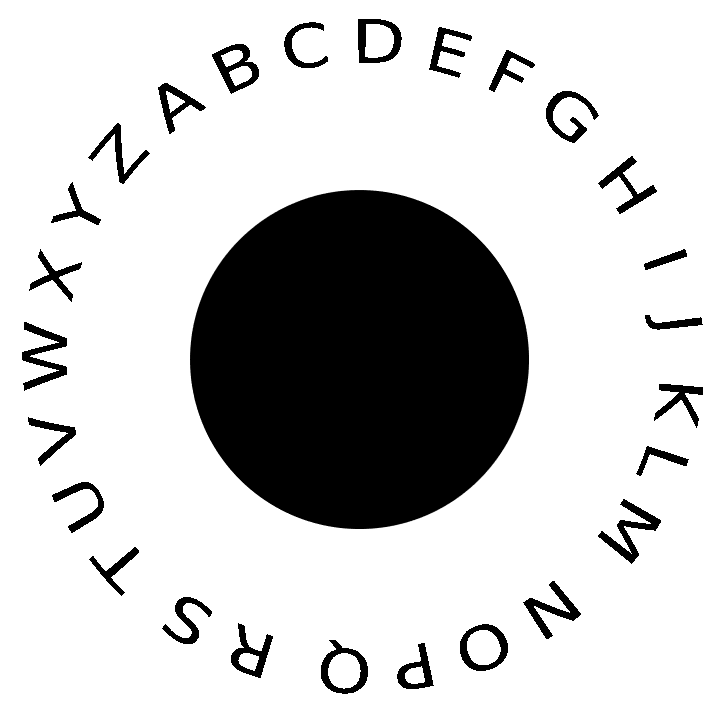
<style>
.page{position:relative;width:720px;height:720px;background:#ffffff}
.page>*{position:absolute;margin:0}
.t1{font:60px "DejaVuSans";color:#000000}
</style>
<div class="page">
<p class="t1" style="left:158px;top:18px;width:441px;height:126px">A B C D E F G</p>
<p class="t1" style="left:22px;top:123px;width:128px;height:473px;rotate:-90deg">T U V W X Y Z</p>
<p class="t1" style="left:597px;top:155px;width:107px;height:409px;rotate:90deg">H  I  J  K L M</p>
<p class="t1" style="left:162px;top:580px;width:420px;height:114px;rotate:180deg">N O P Q  R S</p>
</div>
